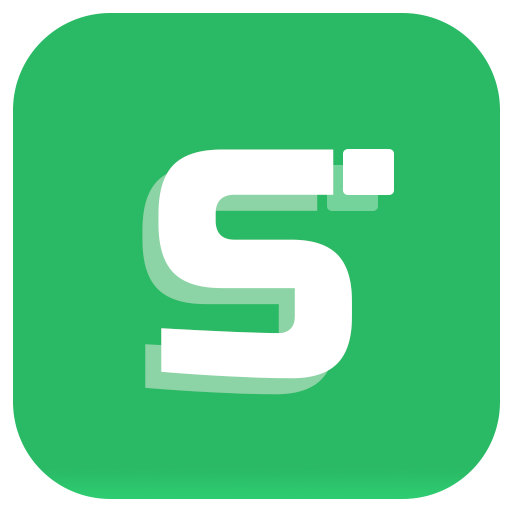
<style>
.page{position:relative;width:512px;height:512px;background:#2aba66}
.page>*{position:absolute;margin:0}
.t1{font:322.4px "RussoOne-Regular";letter-spacing:0.2em;color:#ffffff}
</style>
<div class="page">
<p class="t1" style="left:158px;top:149px;width:194px;height:230px">S</p>
<p class="t1" style="left:142px;top:165px;width:194px;height:230px;opacity:0.35">S</p>
</div>
